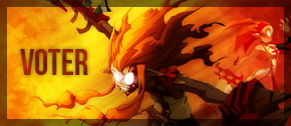
<style>
.page{position:relative;width:291px;height:126px}
.page>*{position:absolute;margin:0}
.t1{font:36px "BebasNeue"}
</style>
<div class="page">
<p class="t1" style="left:20px;top:49px;width:68px;height:26px">Voter</p>
</div>
